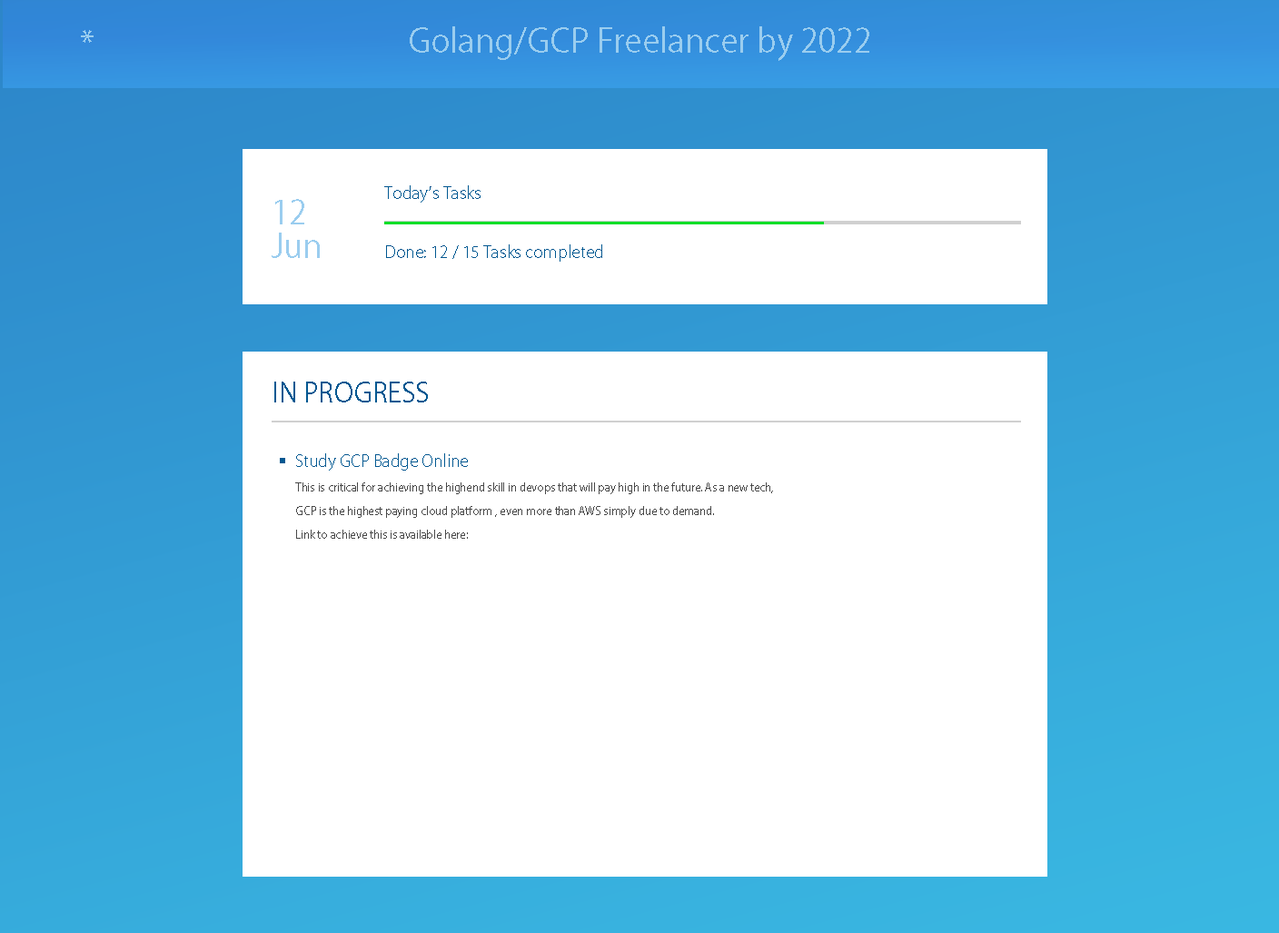
<style>
.page{position:relative;width:1279px;height:933px;background:#ffffff}
.page>*{position:absolute;margin:0}
.t1{font:32.7px "KozGoPr6N-Regular";color:#9acdef}
.t2{font:16.3px "KozGoPr6N-Regular";color:#015891}
.t3{font:32.7px/33.6px "KozGoPr6N-Regular";color:#9acdef}
.t4{font:27.2px "KozGoPr6N-Regular";color:#015891}
.t5{font:10.9px/23.5px "KozGoPr6N-Regular";color:#484848}
</style>
<div class="page">
<p class="t1" style="left:81px;top:30px;width:13px;height:13px">*</p>
<p class="t1" style="left:410px;top:26px;width:459px;height:35px">Golang/GCP Freelancer by 2022</p>
<p class="t2" style="left:384px;top:185px;width:96px;height:18px">Today’s Tasks</p>
<p class="t3" style="left:272px;top:199px;width:48px;height:59px">12<br>Jun</p>
<p class="t2" style="left:386px;top:244px;width:216px;height:18px">Done: 12 / 15 Tasks completed</p>
<p class="t4" style="left:274px;top:381px;width:154px;height:21px">IN PROGRESS</p>
<p class="t2" style="left:296px;top:453px;width:172px;height:17px">Study GCP Badge Online</p>
<p class="t5" style="left:295px;top:482px;width:478px;height:56px">This is critical for achieving the highend skill in devops that will pay high in the future. As a new tech, GCP is the highest paying cloud platform , even more than AWS simply due to demand.<br>Link to achieve this is available here:</p>
</div>
